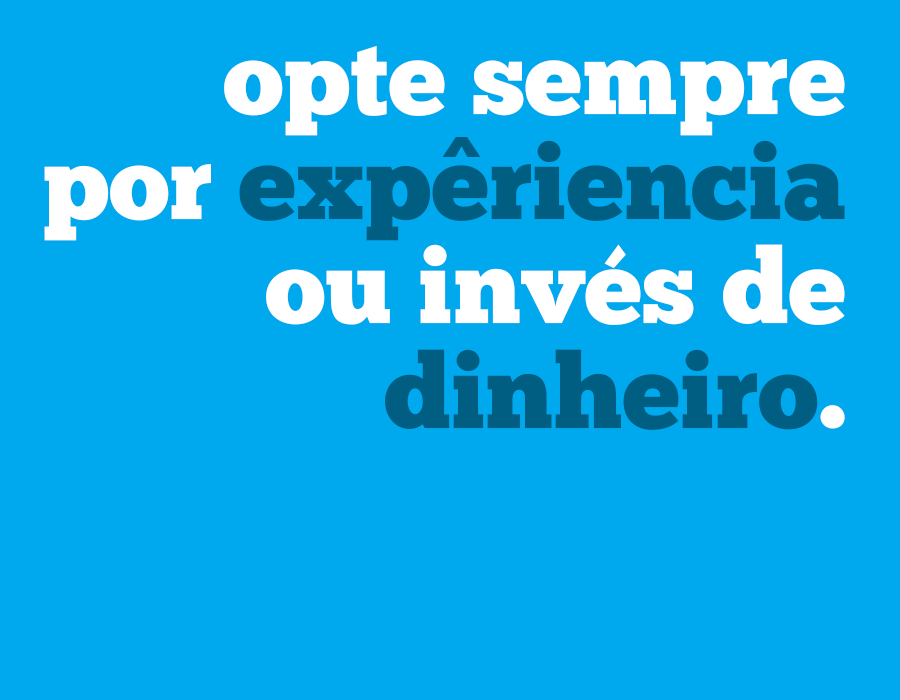
<style>
.page{position:relative;width:900px;height:700px;background:#00a9ee}
.page>*{position:absolute;margin:0}
.t1{font:104.5px/104.5px "ChunkFive-Roman";color:#ffffff}
.t2{font:104.5px/104.5px "ChunkFive-Roman";color:#005e83}
.t3{font:66.2px "MEgalopolisExtra";color:#005e83}
</style>
<div class="page">
<p class="t1" style="left:44px;top:46px;width:801px;height:384px;text-align:right">opte sempre<br>por <span class="t2">experiencia<br></span>ou invés de<br><span class="t2">dinheiro</span>.</p>
<p class="t3" style="left:442px;top:137px;width:39px;height:20px">^</p>
</div>
